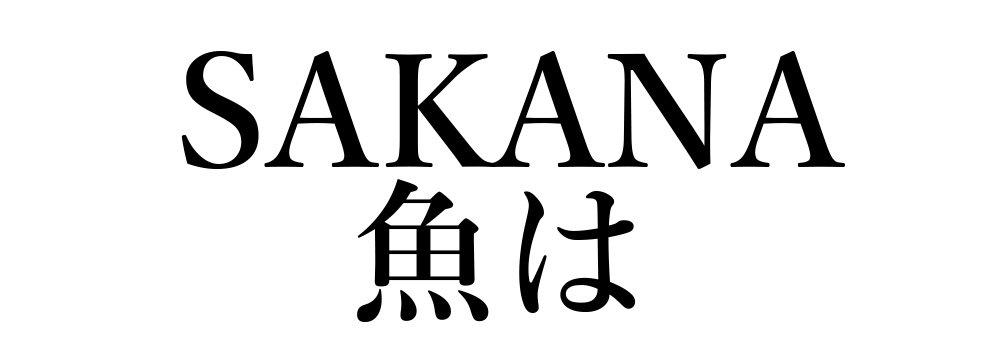
<style>
.page{position:relative;width:1000px;height:350px;background:#ffffff}
.page>*{position:absolute;margin:0}
.t1{font:155px "YuMincho-Demibold";color:#000000}
</style>
<div class="page">
<p class="t1" style="left:181px;top:51px;width:664px;height:118px">SAKANA</p>
<p class="t1" style="left:357px;top:179px;width:279px;height:143px">魚は</p>
</div>
